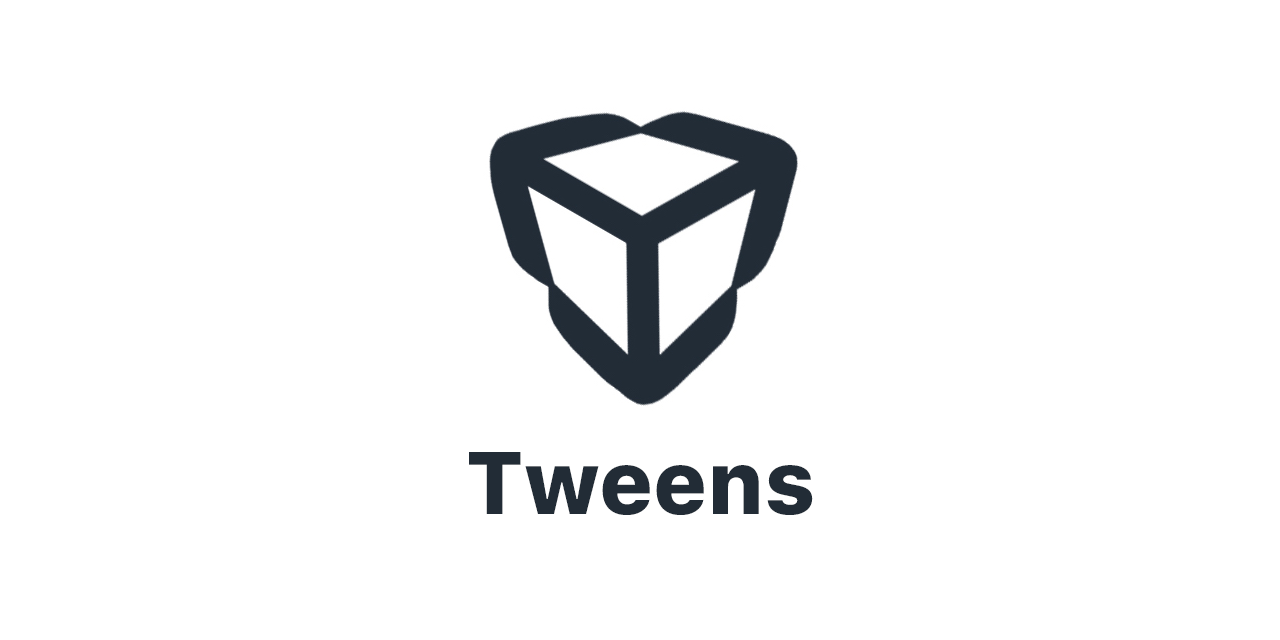
<style>
.page{position:relative;width:1280px;height:640px;background:#ffffff}
.page>*{position:absolute;margin:0}
.t1{font:88px "SFProText-Heavy";color:#222c36}
</style>
<div class="page">
<p class="t1" style="left:469px;top:452px;width:344px;height:63px">Tweens</p>
</div>
